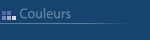
<style>
.page{position:relative;width:150px;height:40px;background:#16436f}
.page>*{position:absolute;margin:0}
.t1{font:14px "MyriadPro-Regular";color:#5b7d9d}
</style>
<div class="page">
<p class="t1" style="left:19px;top:8px;width:52px;height:11px">Couleurs</p>
</div>
